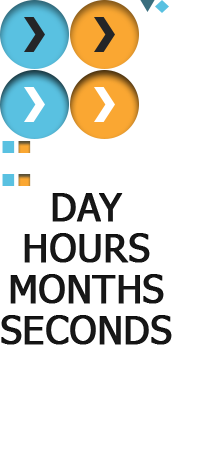
<style>
.page{position:relative;width:219px;height:450px;background:#ffffff}
.page>*{position:absolute;margin:0}
.t1{font:80px "Tahoma";color:#59c1e1;font-weight:bold}
.t2{font:80px "Tahoma";font-weight:bold}
.t3{font:38px/41px "Tahoma";color:#161616;font-weight:bold}
</style>
<div class="page">
<p class="t1" style="left:2px;top:141px;width:13px;height:45px">:</p>
<p class="t2" style="left:18px;top:141px;width:13px;height:45px">:</p>
<p class="t3" style="left:1px;top:193px;width:171px;height:152px;text-align:center">DAY<br>HOURS<br>MONTHS<br>SECONDS</p>
</div>
